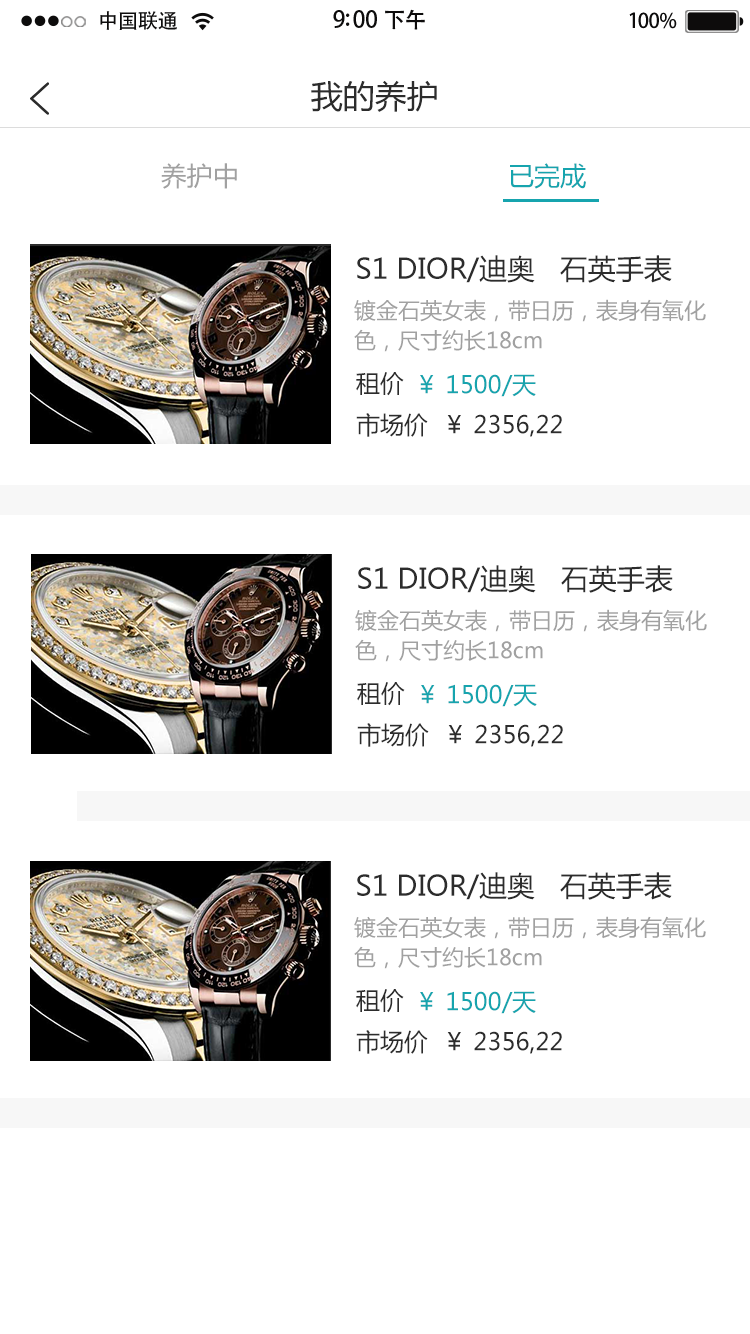
<style>
.page{position:relative;width:750px;height:1334px;background:#ffffff}
.page>*{position:absolute;margin:0}
.t1{font:20.4px "AdobeHeitiStd-Regular";letter-spacing:-0.02em;color:#000000}
.t2{font:23px "AdobeHeitiStd-Regular";letter-spacing:-0.02em;color:#000000}
.t3{font:22px "AdobeHeitiStd-Regular";letter-spacing:-0.02em;color:#000000}
.t4{font:20.4px "AdobeHeitiStd-Regular";letter-spacing:-0.02em;color:#010101}
.t5{font:32px "MicrosoftYaHei";color:#2c2c2c}
.t6{font:26px "MicrosoftYaHei";color:#a1a1a1}
.t7{font:26px "MicrosoftYaHei";color:#2c2c2c}
.t8{font:26px "MicrosoftYaHei";color:#16a4ae}
.t9{font:28px "MicrosoftYaHei";color:#2c2c2c}
.t10{font:22px/15px "MicrosoftYaHei";color:#a1a1a1}
.t11{font:24px "MicrosoftYaHei";color:#2c2c2c}
.t12{font:24px "MicrosoftYaHei";color:#16a4ae}
</style>
<div class="page">
<p class="t1" style="left:100px;top:11px;width:77px;height:19px">中国联通</p>
<p class="t2" style="left:333px;top:9px;width:92px;height:21px">9:00 <span class="t3">下午</span></p>
<p class="t4" style="left:629px;top:12px;width:48px;height:17px">100%</p>
<p class="t5" style="left:311px;top:80px;width:126px;height:32px">我的养护</p>
<p class="t6" style="left:161px;top:163px;width:425px;height:26px"><span class="t7"> </span>养护中                                   <span class="t8">已完成</span></p>
<p class="t9" style="left:357px;top:255px;width:315px;height:28px">S1 DIOR/迪奥   石英手表</p>
<p class="t10" style="left:354px;top:299px;width:352px;height:53px">镀金石英女表，带日历，表身有氧化<br><br>色，尺寸约长18cm</p>
<p class="t11" style="left:356px;top:372px;width:48px;height:24px">租价</p>
<p class="t12" style="left:420px;top:374px;width:116px;height:23px">￥ 1500/天</p>
<p class="t11" style="left:356px;top:413px;width:206px;height:24px">市场价  ￥ 2356,22</p>
<p class="t9" style="left:358px;top:565px;width:315px;height:28px">S1 DIOR/迪奥   石英手表</p>
<p class="t10" style="left:355px;top:609px;width:352px;height:53px">镀金石英女表，带日历，表身有氧化<br><br>色，尺寸约长18cm</p>
<p class="t11" style="left:357px;top:682px;width:48px;height:24px">租价</p>
<p class="t12" style="left:421px;top:684px;width:116px;height:23px">￥ 1500/天</p>
<p class="t11" style="left:357px;top:723px;width:206px;height:24px">市场价  ￥ 2356,22</p>
<p class="t9" style="left:357px;top:872px;width:315px;height:28px">S1 DIOR/迪奥   石英手表</p>
<p class="t10" style="left:354px;top:916px;width:352px;height:53px">镀金石英女表，带日历，表身有氧化<br><br>色，尺寸约长18cm</p>
<p class="t11" style="left:356px;top:989px;width:48px;height:24px">租价</p>
<p class="t12" style="left:420px;top:991px;width:116px;height:23px">￥ 1500/天</p>
<p class="t11" style="left:356px;top:1030px;width:206px;height:24px">市场价  ￥ 2356,22</p>
</div>
